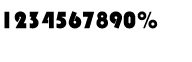
<style>
.page{position:relative;width:192px;height:62px;background:#ffffff}
.page>*{position:absolute;margin:0}
.t1{font:24px "STHupo";color:#000000}
</style>
<div class="page">
<p class="t1" style="left:4px;top:11px;width:154px;height:18px">1234567890%</p>
</div>
